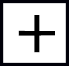
<style>
.page{position:relative;width:69px;height:66px;background:#ffffff}
.page>*{position:absolute;margin:0}
.t1{font:81.1px "Lora-Regular";color:#000000}
</style>
<div class="page">
<p class="t1" style="left:18px;top:15px;width:37px;height:38px">+</p>
</div>
